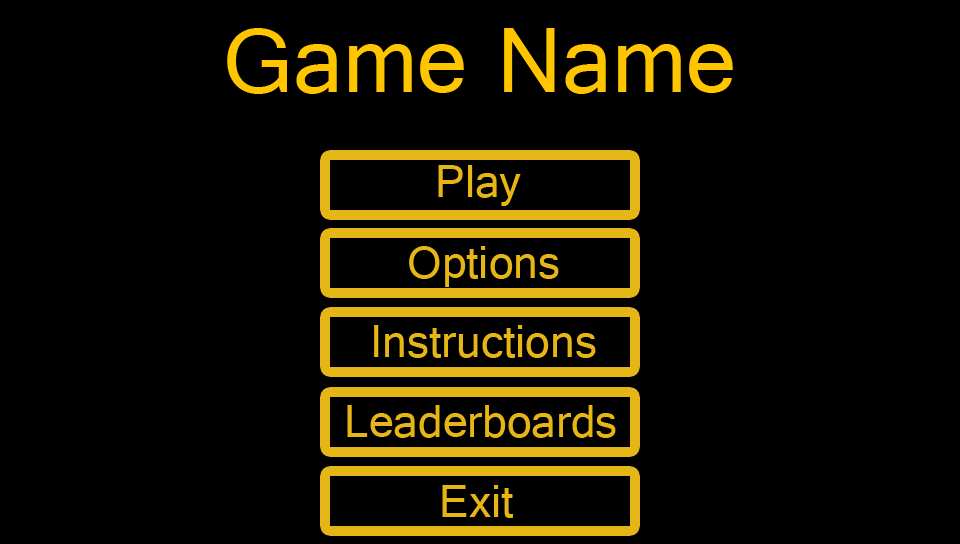
<style>
.page{position:relative;width:960px;height:544px;background:#000000}
.page>*{position:absolute;margin:0}
.t1{font:97px "Gautami";color:#ffc600}
.t2{font:48px "Gautami";color:#e5b615}
</style>
<div class="page">
<p class="t1" style="left:227px;top:28px;width:506px;height:66px">Game Name</p>
<p class="t2" style="left:438px;top:165px;width:83px;height:41px">Play</p>
<p class="t2" style="left:409px;top:246px;width:150px;height:41px">Options</p>
<p class="t2" style="left:374px;top:325px;width:222px;height:33px">Instructions</p>
<p class="t2" style="left:347px;top:405px;width:269px;height:33px">Leaderboards</p>
<p class="t2" style="left:442px;top:485px;width:71px;height:33px">Exit</p>
</div>
